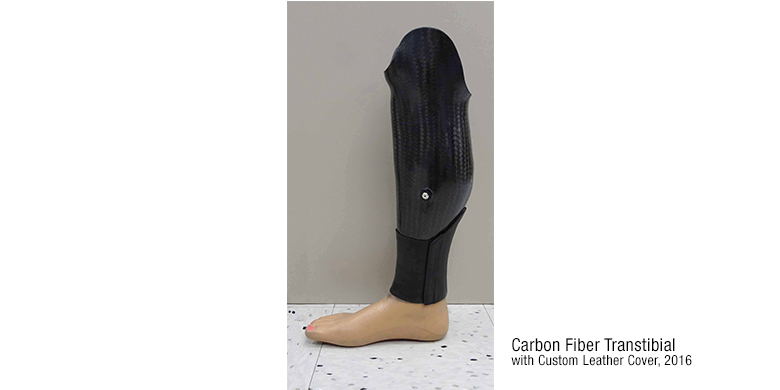
<style>
.page{position:relative;width:780px;height:390px;background:#ffffff}
.page>*{position:absolute;margin:0}
.t1{font:14px/14px "HelveticaNeueLTStd-Cn";letter-spacing:0.02em;color:#000000}
.t2{font:18px/14px "HelveticaNeueLTStd-Cn";letter-spacing:0.02em;color:#000000}
</style>
<div class="page">
<p class="t1" style="left:511px;top:338px;width:181px;height:29px"><span class="t2">Carbon Fiber Transtibial <br></span>with Custom Leather Cover, 2016</p>
</div>
